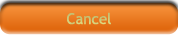
<style>
.page{position:relative;width:178px;height:37px}
.page>*{position:absolute;margin:0}
.t1{font:15px "TrebuchetMS";color:#ccc978}
</style>
<div class="page">
<p class="t1" style="left:67px;top:12px;width:44px;height:13px">Cancel</p>
</div>
